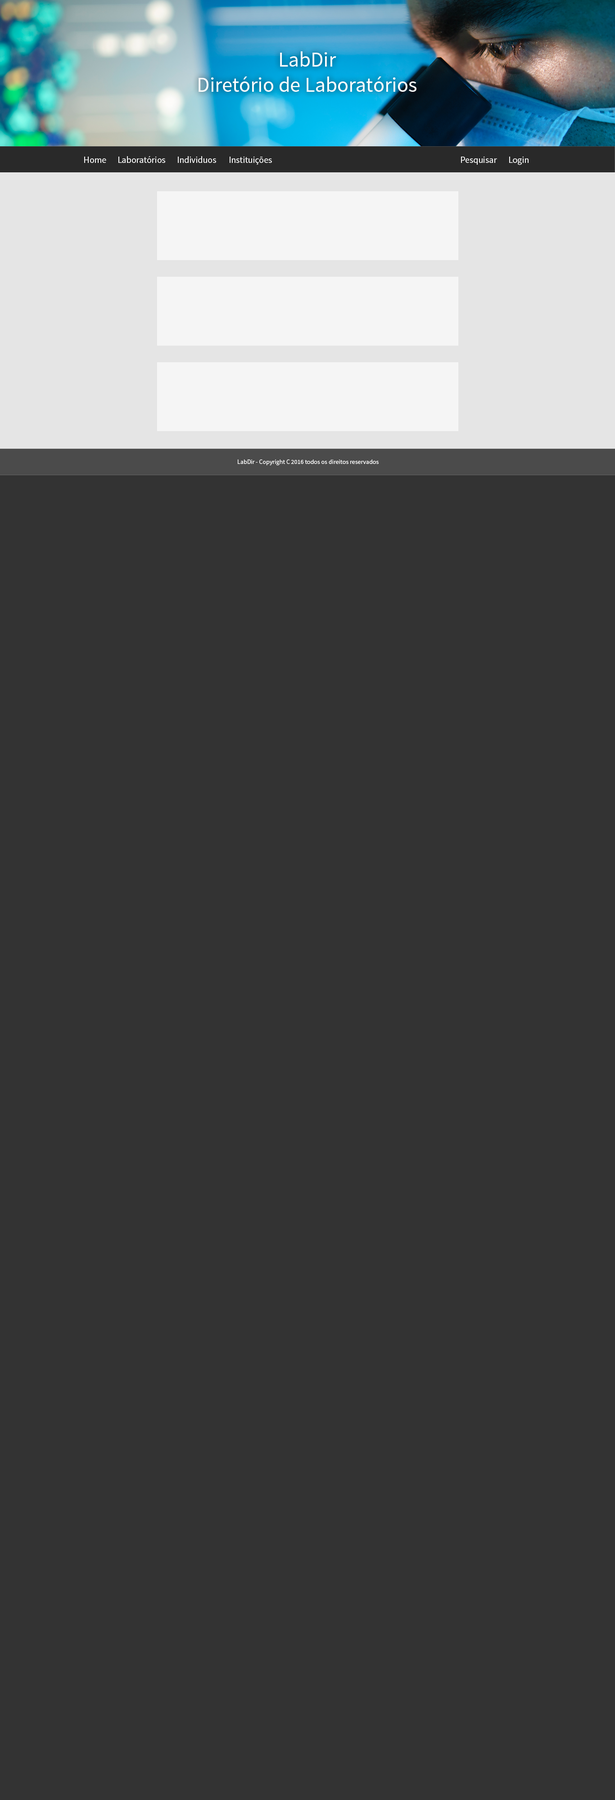
<style>
.page{position:relative;width:615px;height:1800px;background:#333333}
.page>*{position:absolute;margin:0}
.t1{font:21px "SourceSansPro-Regular";color:#ffffff}
.t2{font:9px "SourceSansPro-Regular";color:#ffffff}
.t3{font:6.3px "SourceSansPro-Regular";color:#ffffff}
</style>
<div class="page">
<p class="t1" style="left:198px;top:51px;width:218px;height:41px;text-align:center">LabDir<br>Diretório de Laboratórios</p>
<p class="t2" style="left:84px;top:157px;width:22px;height:6px">Home</p>
<p class="t2" style="left:118px;top:156px;width:47px;height:7px">Laboratórios</p>
<p class="t2" style="left:178px;top:156px;width:38px;height:7px">Individuos</p>
<p class="t2" style="left:230px;top:157px;width:42px;height:8px">Instituições</p>
<p class="t2" style="left:461px;top:157px;width:36px;height:8px">Pesquisar</p>
<p class="t2" style="left:509px;top:157px;width:19px;height:8px">Login</p>
<p class="t3" style="left:238px;top:459px;width:140px;height:6px">LabDir - Copyright C 2016 todos os direitos reservados</p>
</div>
